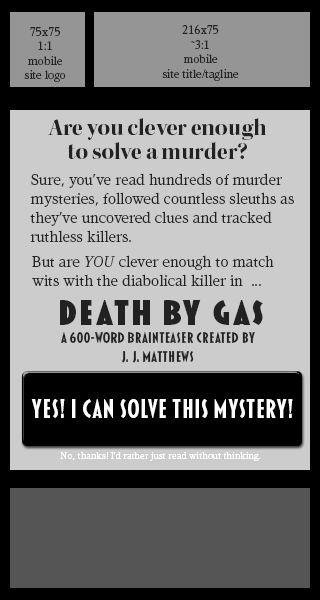
<style>
.page{position:relative;width:320px;height:600px;background:#cccccc}
.page>*{position:absolute;margin:0}
.t1{font:12px "Kandal-Book";color:#222222}
.t2{font:24px/24px "KeplerStd-BoldDisp";color:#222222}
.t3{font:16px "Kandal-Book";color:#222222}
.t4{font:16px "Kandal-BookItalic";color:#222222}
.t5{font:36px "Blakely-Black";letter-spacing:0.075em;color:#222222}
.t6{font:16px "Blakely-Bold";color:#222222}
.t7{font:27px "Blakely-Bold";color:#ffffff}
.t8{font:10px "Kandal-Book";color:#ffffff}
</style>
<div class="page">
<p class="t1" style="left:24px;top:27px;width:42px;height:55px;text-align:center">75x75<br>1:1<br>mobile<br>site logo</p>
<p class="t1" style="left:162px;top:24px;width:77px;height:57px;text-align:center">216x75<br>~3:1<br>mobile<br>site title/tagline</p>
<p class="t2" style="left:48px;top:118px;width:219px;height:41px;text-align:center">Are you clever enough<br>to solve a murder?</p>
<p class="t3" style="left:30px;top:173px;width:264px;height:69px">Sure, you’ve read hundreds of murder mysteries, followed countless sleuths as they’ve uncovered clues and tracked ruthless killers.</p>
<p class="t3" style="left:32px;top:255px;width:242px;height:31px">But are <span class="t4">YOU </span>clever enough to match<br>wits with the diabolical killer in  ...</p>
<p class="t5" style="left:60px;top:300px;width:203px;height:25px">DEATH BY GAS</p>
<p class="t6" style="left:61px;top:332px;width:194px;height:31px;text-align:center">a 600-word brainteaser created by<br>J. J. MATTHEWS</p>
<p class="t7" style="left:31px;top:399px;width:262px;height:19px">YES! I can solve this mystery!</p>
<p class="t8" style="left:60px;top:452px;width:201px;height:9px">No, thanks! I’d rather just read without thinking.</p>
</div>
